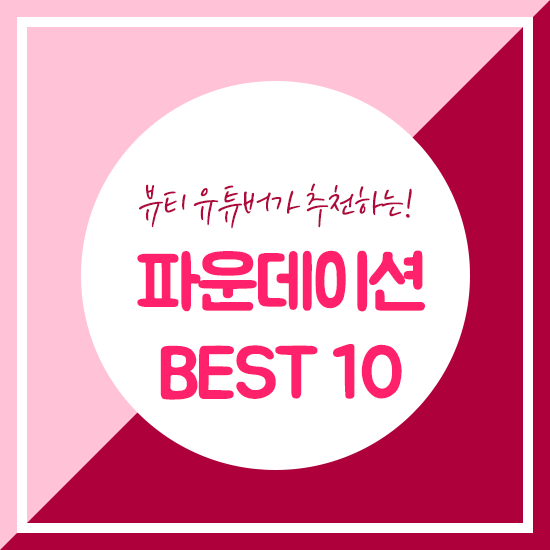
<style>
.page{position:relative;width:550px;height:550px;background:#ffffff}
.page>*{position:absolute;margin:0}
.t1{font:42px "THEFACESHOP";letter-spacing:-0.05em;color:#af093d}
.t2{font:75px "BMJUA";letter-spacing:-0.05em;color:#ff216c}
</style>
<div class="page">
<p class="t1" style="left:139px;top:183px;width:273px;height:46px">뷰티 유튜버가 추천하는!</p>
<p class="t2" style="left:137px;top:250px;width:288px;height:150px;text-align:center">파운데이션<br>BEST 10</p>
</div>
